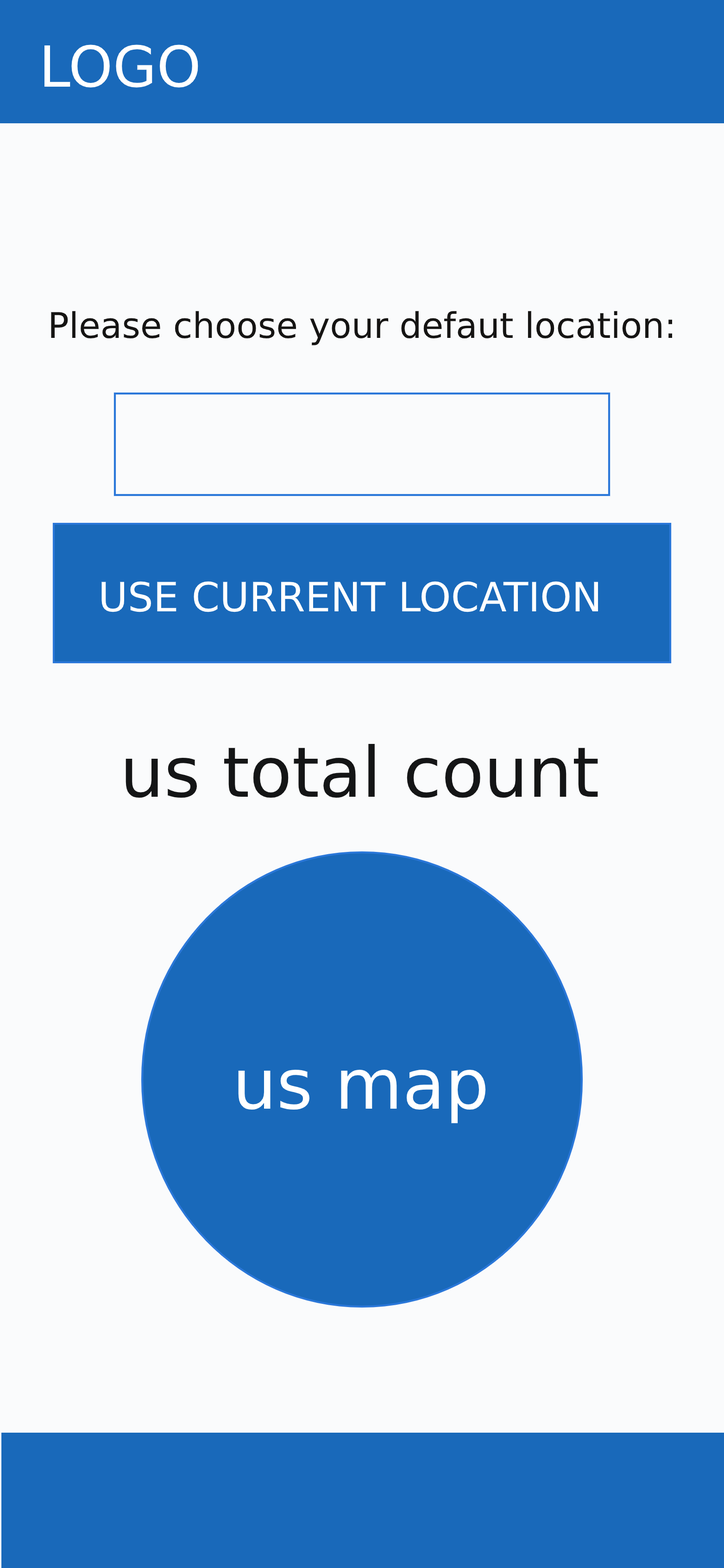
<style>
.page{position:relative;width:724px;height:1568px;background:#fafbfc}
.page>*{position:absolute;margin:0}
.t1{font:56.5px "DejaVuSans";color:#ffffff}
.t2{font:35.2px "DejaVuSans";color:#151413}
.t3{font:69.5px "DejaVuSans";color:#141516}
.t4{font:69.5px "DejaVuSans";color:#ffffff}
</style>
<div class="page">
<p class="t1" style="left:44px;top:44px;width:154px;height:44px">LOGO</p>
<p class="t2" style="left:51px;top:311px;width:622px;height:34px">Please choose your defaut location:</p>
<p class="t3" style="left:126px;top:744px;width:472px;height:54px">us total count</p>
<p class="t4" style="left:238px;top:1069px;width:248px;height:55px">us map</p>
</div>
